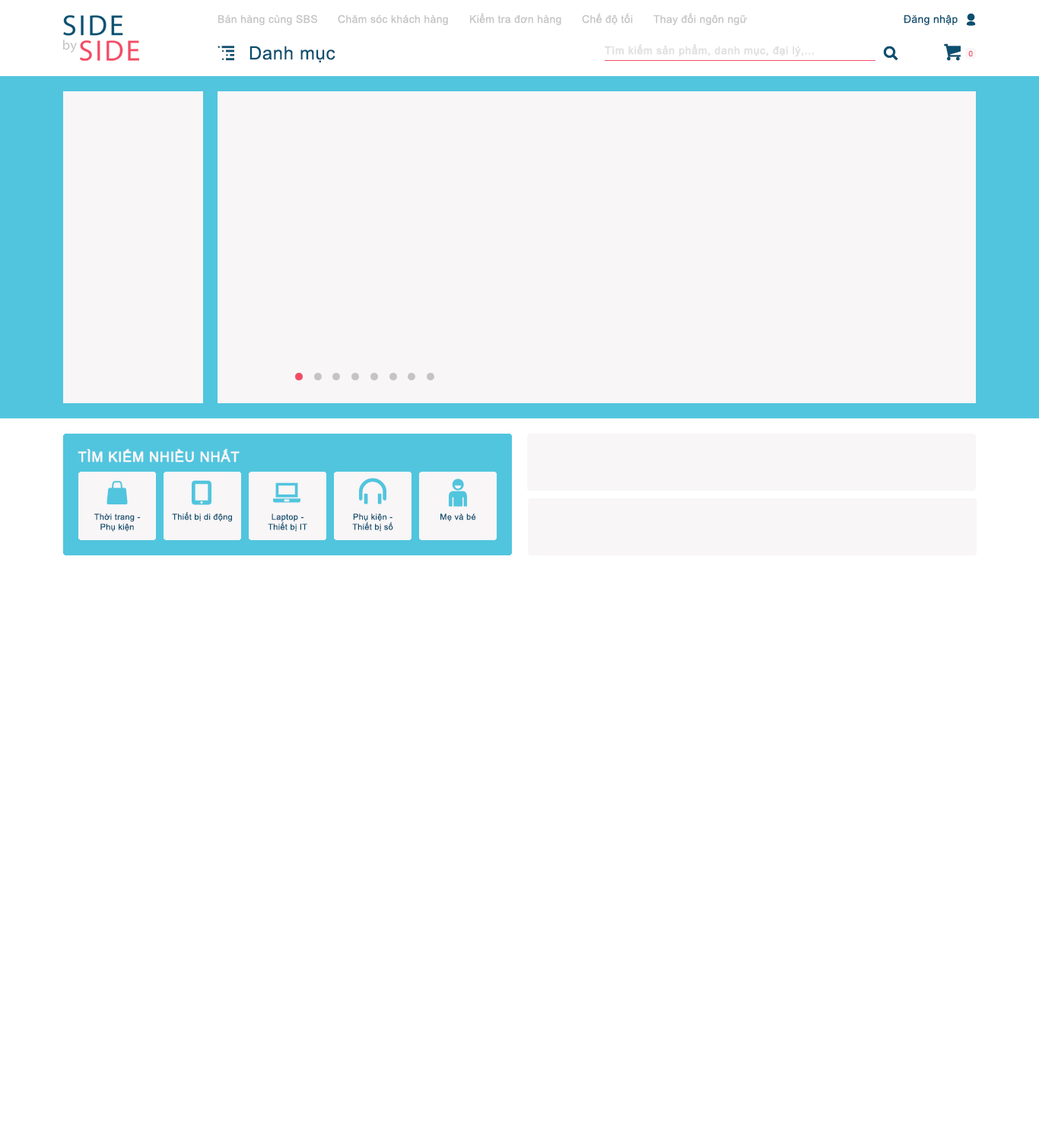
<style>
.page{position:relative;width:1039px;height:1148px;background:#ffffff}
.page>*{position:absolute;margin:0}
.t1{font:10.6px "ArialMT";letter-spacing:0.025em;color:#c5c3c4}
.t2{font:10.6px "ArialMT";letter-spacing:0.025em;color:#0a4f70}
.t3{font:18.3px "ArialMT";letter-spacing:0.025em;color:#0a4f70}
.t4{font:10.6px "ArialMT";letter-spacing:0.025em;color:#e0e0e0;font-weight:bold}
.t5{font:7.6px "ArialMT";letter-spacing:0.025em;color:#f24c64}
.t6{font:13.7px "ArialMT";letter-spacing:0.025em;color:#f8f6f7;text-transform:uppercase;font-weight:bold}
.t7{font:8.4px "ArialMT";letter-spacing:0.025em;color:#0a4f70}
</style>
<div class="page">
<p class="t1" style="left:218px;top:14px;width:99px;height:11px">Bán hàng cùng SBS</p>
<p class="t1" style="left:338px;top:14px;width:110px;height:11px">Chăm sóc khách hàng</p>
<p class="t1" style="left:470px;top:13px;width:91px;height:12px">Kiểm tra đơn hàng</p>
<p class="t1" style="left:582px;top:13px;width:51px;height:12px">Chế độ tối</p>
<p class="t1" style="left:653px;top:13px;width:94px;height:12px">Thay đổi ngôn ngữ</p>
<p class="t2" style="left:903px;top:14px;width:55px;height:11px">Đăng nhập</p>
<p class="t3" style="left:249px;top:46px;width:86px;height:16px">Danh mục</p>
<p class="t4" style="left:605px;top:44px;width:209px;height:13px">Tìm kiếm sản phẩm, danh mục, đại lý,...</p>
<p class="t5" style="left:968px;top:50px;width:5px;height:7px">0</p>
<p class="t6" style="left:78px;top:449px;width:162px;height:13px">Tìm kiếm nhiều nhất</p>
<p class="t7" style="left:94px;top:513px;width:46px;height:19px;text-align:center">Thời trang - <br>Phụ kiện</p>
<p class="t7" style="left:172px;top:512px;width:60px;height:10px">Thiết bị di động</p>
<p class="t7" style="left:268px;top:513px;width:39px;height:19px;text-align:center">Laptop - <br>Thiết bị IT</p>
<p class="t7" style="left:352px;top:513px;width:41px;height:19px;text-align:center">Phụ kiện -<br>Thiết bị số</p>
<p class="t7" style="left:440px;top:513px;width:36px;height:8px">Mẹ và bé</p>
</div>
